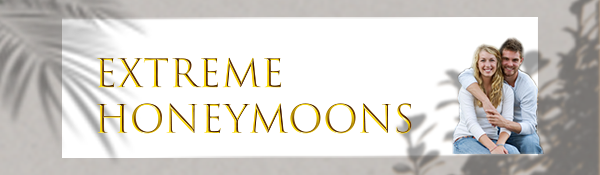
<style>
.page{position:relative;width:600px;height:175px;background:#ffffff}
.page>*{position:absolute;margin:0}
.t1{font:38px "TrajanColor-Concept"}
</style>
<div class="page">
<p class="t1" style="left:97px;top:57px;width:315px;height:77px">Extreme <br>Honeymoons</p>
</div>
